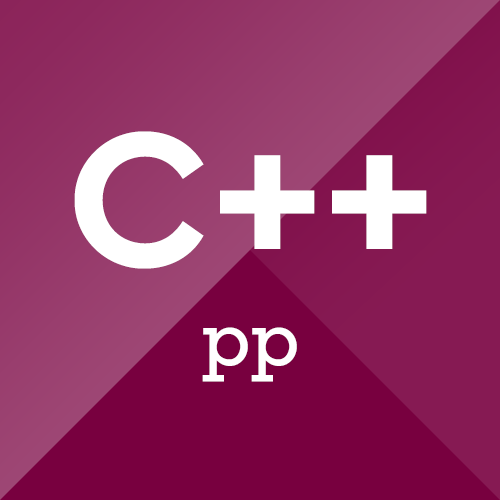
<style>
.page{position:relative;width:500px;height:500px;background:#78003f}
.page>*{position:absolute;margin:0}
.t1{font:200px "CeraPro-Bold";color:#ffffff;text-transform:uppercase}
.t2{font:72px "Rockwell-Regular";color:#ffffff}
</style>
<div class="page">
<p class="t1" style="left:74px;top:131px;width:353px;height:138px">C++</p>
<p class="t2" style="left:202px;top:327px;width:95px;height:55px">pp</p>
</div>
